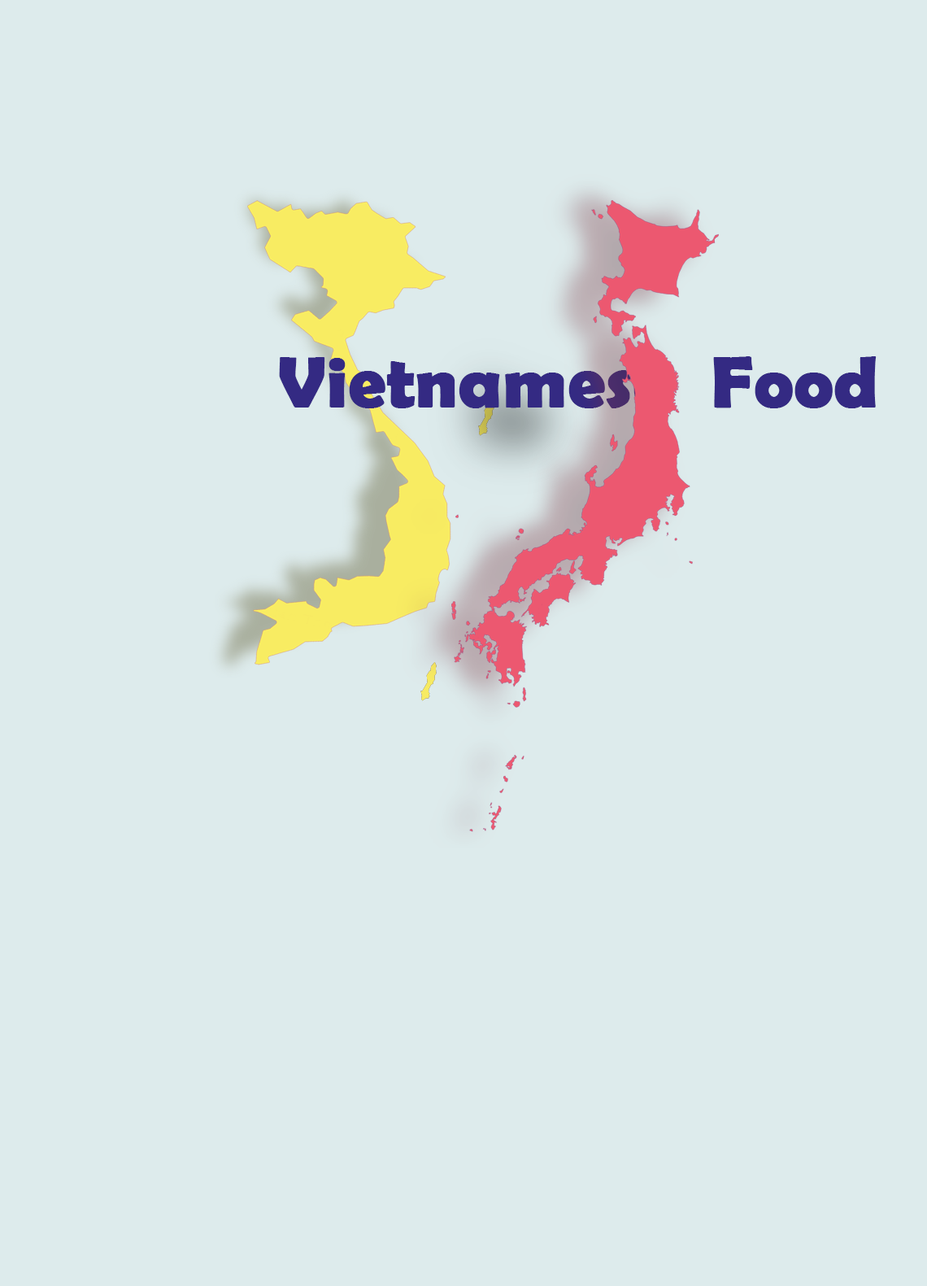
<style>
.page{position:relative;width:927px;height:1286px;background:#ddebec}
.page>*{position:absolute;margin:0}
.t1{font:72.2px "BerlinSansFBDemi-Bold";color:#342a83;font-weight:bold}
</style>
<div class="page">
<p class="t1" style="left:279px;top:356px;width:598px;height:52px">Vietnamese  Food</p>
</div>
